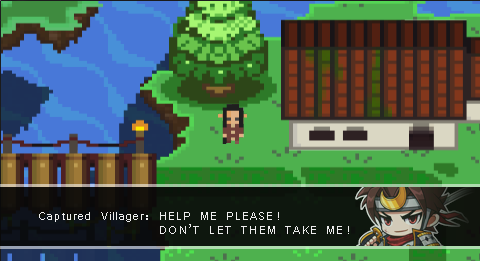
<style>
.page{position:relative;width:480px;height:261px}
.page>*{position:absolute;margin:0}
.t1{font:12px "Vrinda";letter-spacing:0.1em;color:#fefefe}
</style>
<div class="page">
<p class="t1" style="left:39px;top:212px;width:310px;height:22px;opacity:0.9">Captured Villager: HELP ME PLEASE! <br>        DON’T LET THEM TAKE ME!</p>
</div>
